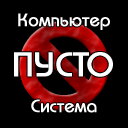
<style>
.page{position:relative;width:128px;height:128px;background:#000000}
.page>*{position:absolute;margin:0}
.t1{font:18px "BauhausC-Medium";color:#ffffff;font-weight:bold}
.t2{font:34px "BauhausC-Medium";color:#ffffff;font-weight:bold}
</style>
<div class="page">
<p class="t1" style="left:18px;top:13px;width:92px;height:17px">Компьютер</p>
<p class="t2" style="left:14px;top:52px;width:99px;height:25px">ПУСТО</p>
<p class="t1" style="left:31px;top:99px;width:66px;height:14px">Система</p>
</div>
